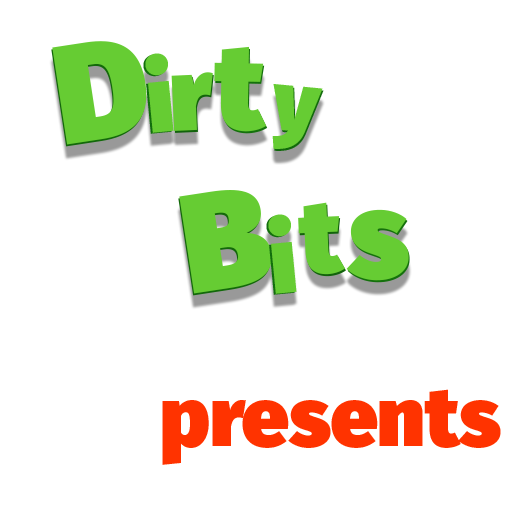
<style>
.page{position:relative;width:512px;height:512px;background:#ffffff}
.page>*{position:absolute;margin:0}
.t1{font:140.3px "FiraSans-Ultra";color:#66cc33}
.t2{font:93.5px "FiraSans-Ultra";color:#66cc33}
.t3{font:121.6px "FiraSans-Ultra";color:#66cc33}
.t4{font:102.9px "FiraSans-Ultra";color:#66cc33}
.t5{font:84.2px "FiraSans-Ultra";color:#66cc33}
.t6{font:83.3px "FiraSans-Ultra";color:#ff3300}
</style>
<div class="page">
<p class="t1" style="left:52px;top:41px;width:95px;height:104px;rotate:-9deg">D</p>
<p class="t2" style="left:145px;top:53px;width:29px;height:80px;rotate:-5deg">i</p>
<p class="t3" style="left:214px;top:46px;width:53px;height:86px;rotate:1deg">t</p>
<p class="t4" style="left:171px;top:72px;width:42px;height:59px;rotate:-3deg">r</p>
<p class="t5" style="left:272px;top:84px;width:51px;height:65px;rotate:5deg">y</p>
<p class="t1" style="left:179px;top:190px;width:93px;height:104px;rotate:-9deg">B</p>
<p class="t4" style="left:298px;top:202px;width:47px;height:73px;rotate:-3deg">t</p>
<p class="t3" style="left:346px;top:209px;width:63px;height:72px;rotate:1deg">s</p>
<p class="t2" style="left:268px;top:214px;width:29px;height:80px;rotate:-5deg">i</p>
<p class="t6" style="left:162px;top:389px;width:339px;height:76px">presents</p>
</div>
